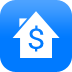
<style>
.page{position:relative;width:72px;height:72px;background:#007aff}
.page>*{position:absolute;margin:0}
.t1{font:28.1px "Roboto-Regular";color:#007aff;scale:1.15 1}
</style>
<div class="page">
<p class="t1" style="left:28px;top:25px;width:16px;height:27px">$</p>
</div>
